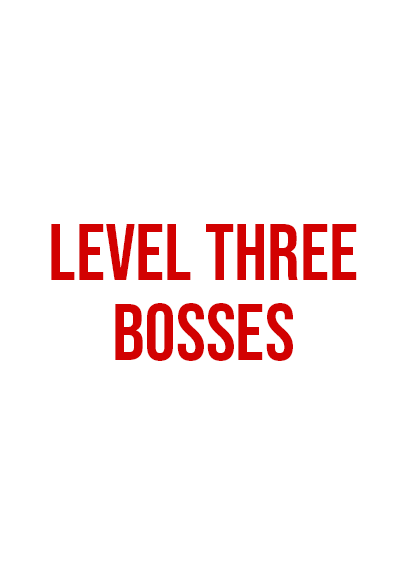
<style>
.page{position:relative;width:408px;height:585px;background:#ffffff}
.page>*{position:absolute;margin:0}
.t1{font:80px/80px "BebasNeue-Regular";color:#d20101}
</style>
<div class="page">
<p class="t1" style="left:51px;top:224px;width:306px;height:137px;text-align:center">level three<br>bosses</p>
</div>
